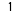
<style>
.page{position:relative;width:20px;height:20px;background:#ffffff}
.page>*{position:absolute;margin:0}
.t1{font:14px "Vrinda";color:#000000}
</style>
<div class="page">
<p class="t1" style="left:8px;top:2px;width:4px;height:9px">1</p>
</div>
